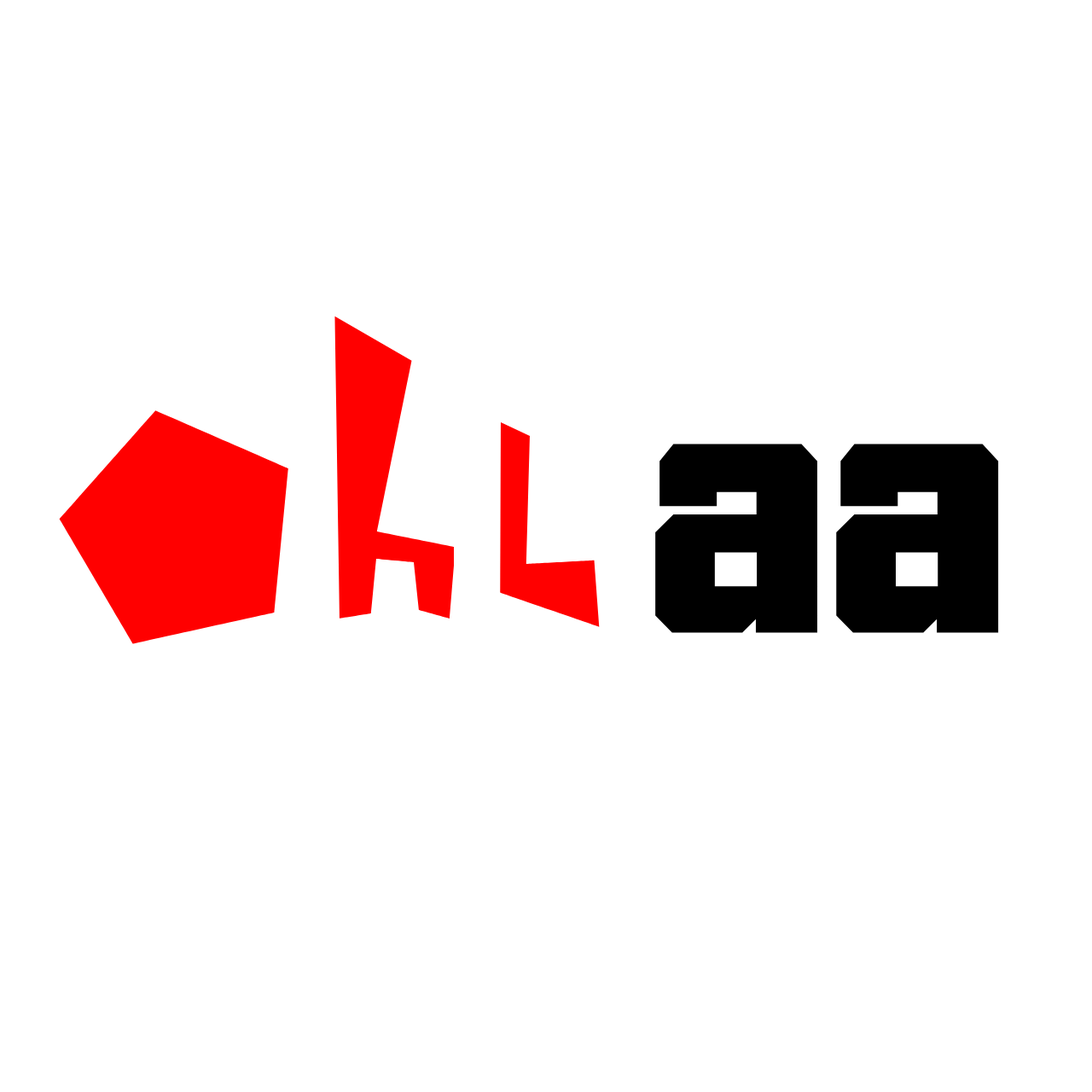
<style>
.page{position:relative;width:1092px;height:1092px;background:#ffffff}
.page>*{position:absolute;margin:0}
.t1{font:328.4px "HYLiLiangHeiJ";color:#000000}
</style>
<div class="page">
<p class="t1" style="left:655px;top:444px;width:344px;height:189px">aa</p>
</div>
